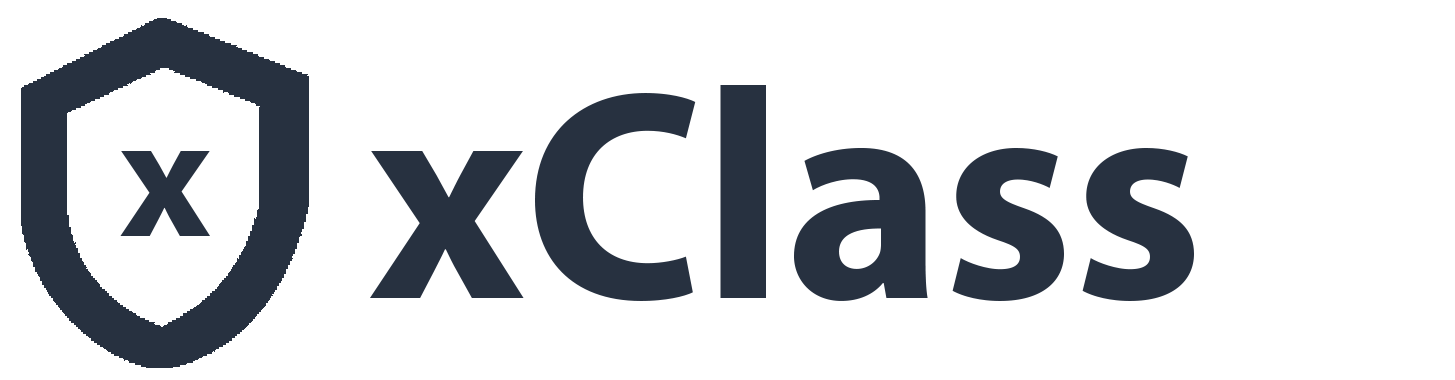
<style>
.page{position:relative;width:1455px;height:380px;background:#ffffff}
.page>*{position:absolute;margin:0}
.t1{font:300px "MyriadPro-Bold";color:#273140}
.t2{font:175px "MyriadPro-Bold";color:#273140}
</style>
<div class="page">
<p class="t1" style="left:370px;top:85px;width:824px;height:216px">xClass</p>
<p class="t2" style="left:120px;top:151px;width:90px;height:85px">x</p>
</div>
